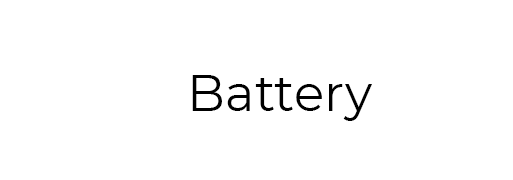
<style>
.page{position:relative;width:513px;height:180px;background:#ffffff}
.page>*{position:absolute;margin:0}
.t1{font:50px "Montserrat-Regular";color:#000000}
</style>
<div class="page">
<p class="t1" style="left:192px;top:75px;width:180px;height:46px">Battery</p>
</div>
